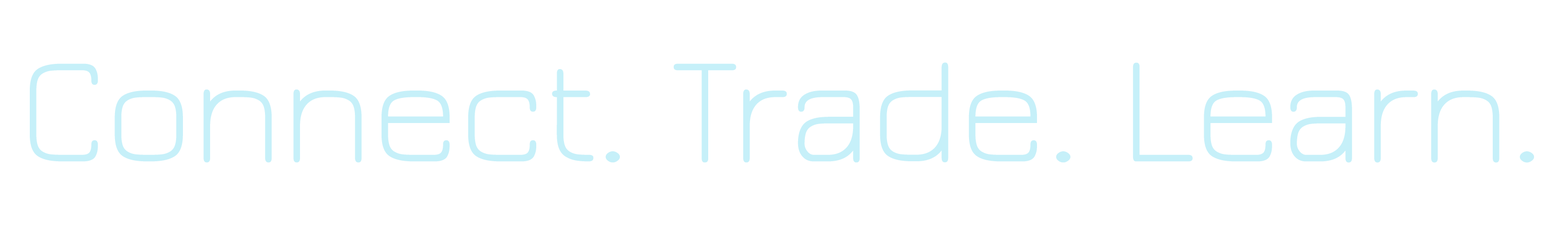
<style>
.page{position:relative;width:1568px;height:234px;background:#ffffff}
.page>*{position:absolute;margin:0}
.t1{font:156.8px "Jura-Light";color:#c6f0f9}
</style>
<div class="page">
<p class="t1" style="left:30px;top:62px;width:1504px;height:101px">Connect. Trade. Learn.</p>
</div>
